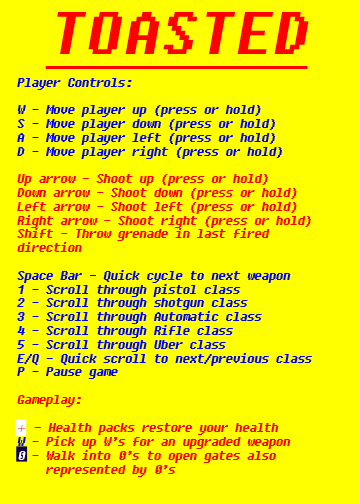
<style>
.page{position:relative;width:360px;height:504px;background:#ffff00}
.page>*{position:absolute;margin:0}
.t1{font:59.8px "Fixedsys";color:#ff0000;font-style:italic;text-decoration:underline}
.t2{font:11.5px "Fixedsys";color:#0000ff;font-style:italic}
.t3{font:11.5px "Fixedsys";color:#ff0000;font-style:italic}
.t4{font:12px "LucidaSansUnicode";color:#ff0000;font-style:italic}
.t5{font:11.5px "Fixedsys";color:#ffffff;font-style:italic}
</style>
<div class="page">
<p class="t1" style="left:45px;top:12px;width:264px;height:57px">TOASTED</p>
<p class="t2" style="left:17px;top:78px;width:295px;height:399px">Player Controls:<br><br>W - Move player up (press or hold)<br>S - Move player down (press or hold)<br>A - Move player left (press or hold)<br>D - Move player right (press or hold)<br><br><span class="t3">Up arrow - Shoot up (press or hold)<br>Down arrow - Shoot down (press or hold)<br>Left arrow - Shoot left (press or hold)<br>Right arrow - Shoot right (press or hold)<br>Shift - Throw grenade in last fired <br>direction<br><br></span>Space Bar - Quick cycle to next weapon<br>1 - Scroll through pistol class<br>2 - Scroll through shotgun class<br>3 - Scroll through Automatic class<br>4 - Scroll through Rifle class<br>5 - Scroll through Uber class<br>E/Q - Quick scroll to next/previous class<br>P - Pause game<br><br><span class="t3">Gameplay:<br><br></span><span class="t4">+</span><span class="t3"> - Health packs restore your health<br></span>W <span class="t3">- Pick up W’s for an upgraded weapon<br></span><span class="t5">0 </span><span class="t3">- Walk into 0’s to open gates also<br>    represented by 0’s</span></p>
</div>
